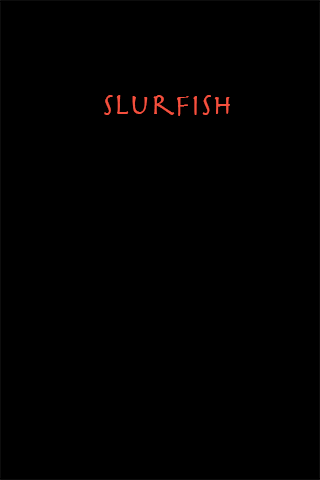
<style>
.page{position:relative;width:320px;height:480px;background:#000000}
.page>*{position:absolute;margin:0}
.t1{font:30px "Herculanum";color:#f5503e}
</style>
<div class="page">
<p class="t1" style="left:104px;top:95px;width:126px;height:21px">SlurFish</p>
</div>
